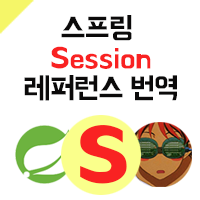
<style>
.page{position:relative;width:200px;height:200px;background:#ffffff}
.page>*{position:absolute;margin:0}
.t1{font:30px/30px "BMHANNA";color:#f92222}
.t2{font:30px/30px "BMHANNA";color:#0b0a0a}
.t3{font:115px "BMHANNA";color:#f92222}
</style>
<div class="page">
<p class="t1" style="left:24px;top:15px;width:153px;height:86px;text-align:center"><span class="t2">스프링 <br></span>Session<br><span class="t2">레퍼런스 번역</span></p>
<p class="t3" style="left:80px;top:125px;width:47px;height:59px">s</p>
</div>
